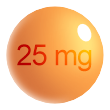
<style>
.page{position:relative;width:110px;height:110px;background:#ffffff}
.page>*{position:absolute;margin:0}
.t1{font:29.3px "ArialMT";letter-spacing:-0.04em}
</style>
<div class="page">
<p class="t1" style="left:17px;top:44px;width:75px;height:28px">25 mg</p>
</div>
